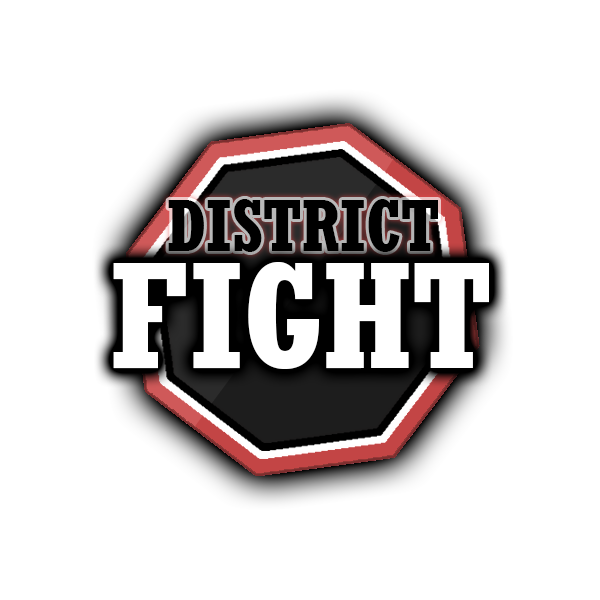
<style>
.page{position:relative;width:600px;height:600px;background:#ffffff}
.page>*{position:absolute;margin:0}
.t1{font:72px "Rockwell-CondensedBold";color:#000000}
.t2{font:150px "Rockwell-CondensedBold";color:#ffffff}
</style>
<div class="page">
<p class="t1" style="left:168px;top:199px;width:270px;height:53px">DISTRICT</p>
<p class="t2" style="left:113px;top:262px;width:376px;height:107px">FIGHT</p>
</div>
